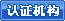
<style>
.page{position:relative;width:65px;height:21px;background:#ffffff}
.page>*{position:absolute;margin:0}
.t1{font:12px "SimSun";letter-spacing:0.025em;color:#ffffff;font-weight:bold}
</style>
<div class="page">
<p class="t1" style="left:7px;top:5px;width:52px;height:11px">认证机构</p>
</div>
